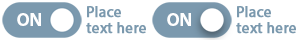
<style>
.page{position:relative;width:300px;height:40px;background:#ffffff}
.page>*{position:absolute;margin:0}
.t1{font:15.4px/15.4px "MyriadPro-Regular";color:#7b99ae;font-weight:bold}
.t2{font:18.5px "MyriadPro-Bold";color:#ffffff}
</style>
<div class="page">
<p class="t1" style="left:86px;top:6px;width:60px;height:28px">Place text here</p>
<p class="t1" style="left:236px;top:6px;width:60px;height:28px">Place text here</p>
<p class="t2" style="left:17px;top:13px;width:24px;height:13px">ON</p>
<p class="t2" style="left:167px;top:13px;width:24px;height:13px">ON</p>
</div>
